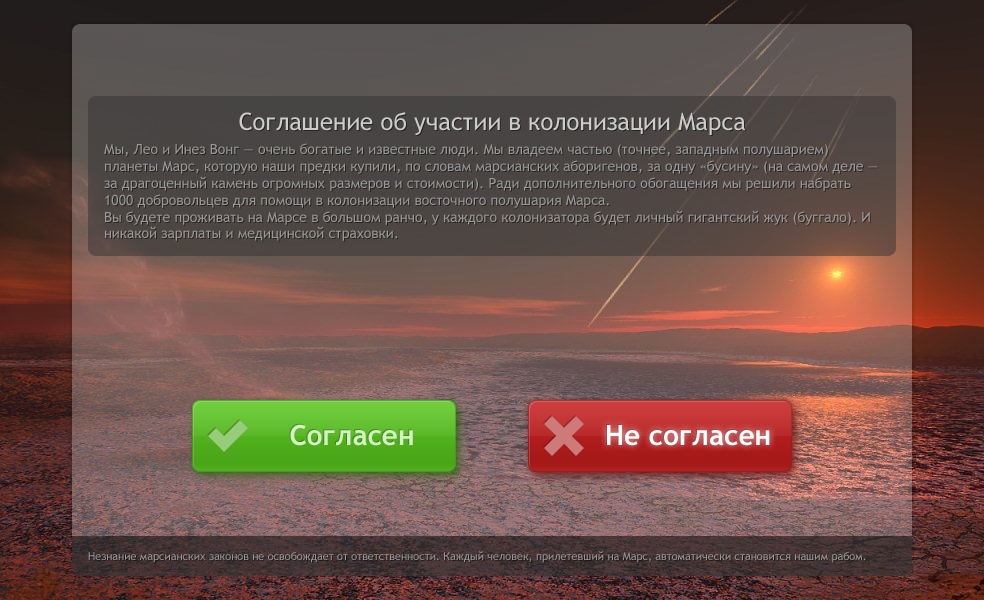
<style>
.page{position:relative;width:984px;height:600px}
.page>*{position:absolute;margin:0}
.t1{font:24px "TrebuchetMS";color:#cccccc}
.t2{font:14px "TrebuchetMS";color:#999999}
.t3{font:28px "TrebuchetMS-Bold";color:#d3f2c2}
.t4{font:28px "TrebuchetMS-Bold";color:#ffffff}
.t5{font:11px "TrebuchetMS";color:#999999}
</style>
<div class="page">
<p class="t1" style="left:239px;top:112px;width:506px;height:23px">Соглашение об участии в колонизации Марса</p>
<p class="t2" style="left:104px;top:143px;width:774px;height:98px">Мы, Лео и Инез Вонг — очень богатые и известные люди. Мы владеем частью (точнее, западным полушарием) планеты Марс, которую наши предки купили, по словам марсианских аборигенов, за одну «бусину» (на самом деле — за драгоценный камень огромных размеров и стоимости). Ради дополнительного обогащения мы решили набрать 1000 добровольцев для помощи в колонизации восточного полушария Марса. <br>Вы будете проживать на Марсе в большом ранчо, у каждого колонизатора будет личный гигантский жук (буггало). И никакой зарплаты и медицинской страховки.</p>
<p class="t3" style="left:290px;top:424px;width:123px;height:22px">Согласен</p>
<p class="t4" style="left:607px;top:425px;width:163px;height:21px">Не согласен</p>
<p class="t5" style="left:88px;top:551px;width:778px;height:12px">Незнание марсианских законов не освобождает от ответственности. Каждый человек, прилетевший на Марс, автоматически становится нашим рабом.</p>
</div>
